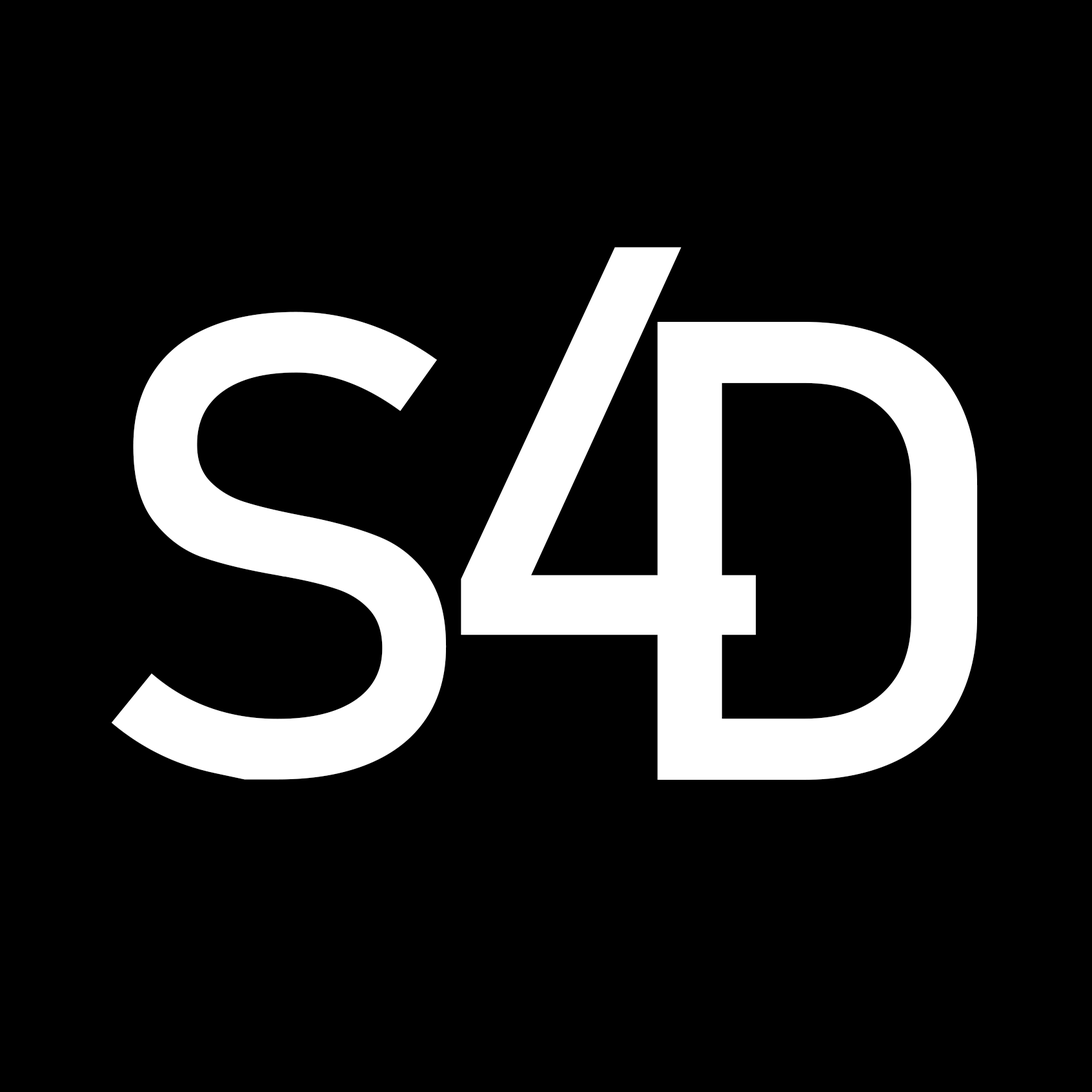
<style>
.page{position:relative;width:1092px;height:1092px;background:#000000}
.page>*{position:absolute;margin:0}
.t1{font:645.2px "Bahnschrift";letter-spacing:-0.04em;color:#ffffff}
</style>
<div class="page">
<p class="t1" style="left:461px;top:247px;width:295px;height:459px">4</p>
<p class="t1" style="left:111px;top:312px;width:335px;height:468px">S</p>
<p class="t1" style="left:657px;top:322px;width:320px;height:458px">D</p>
</div>
